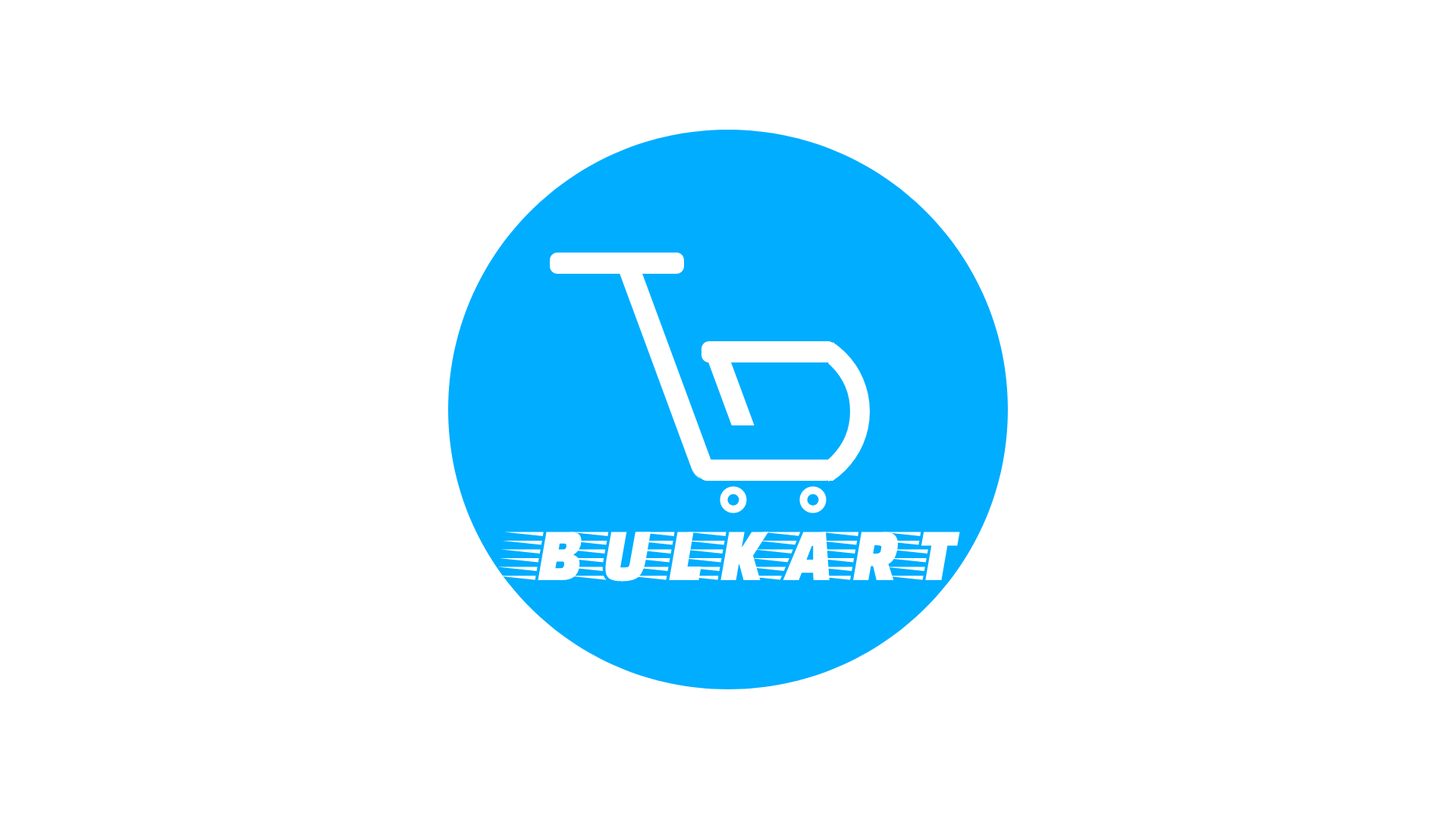
<style>
.page{position:relative;width:1456px;height:819px;background:#ffffff}
.page>*{position:absolute;margin:0}
.t1{font:91px "FasterOne-Regular";color:#ffffff}
</style>
<div class="page">
<p class="t1" style="left:496px;top:532px;width:464px;height:50px">bulkart</p>
</div>
